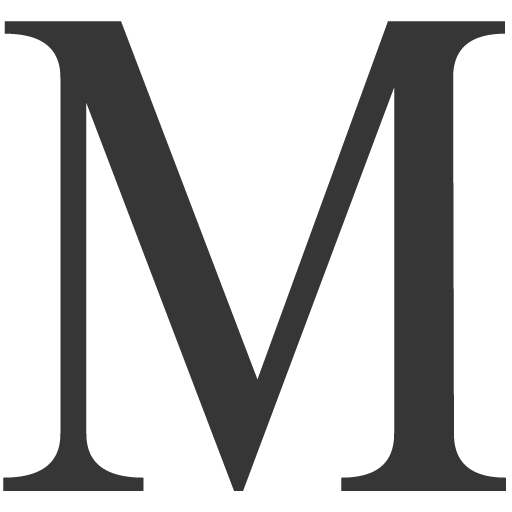
<style>
.page{position:relative;width:512px;height:512px;background:#ffffff}
.page>*{position:absolute;margin:0}
.t1{font:1041.7px "EucrosiaUPC";color:#363636;scale:0.83 1}
</style>
<div class="page">
<p class="t1" style="left:3px;top:21px;width:503px;height:470px">M</p>
</div>
